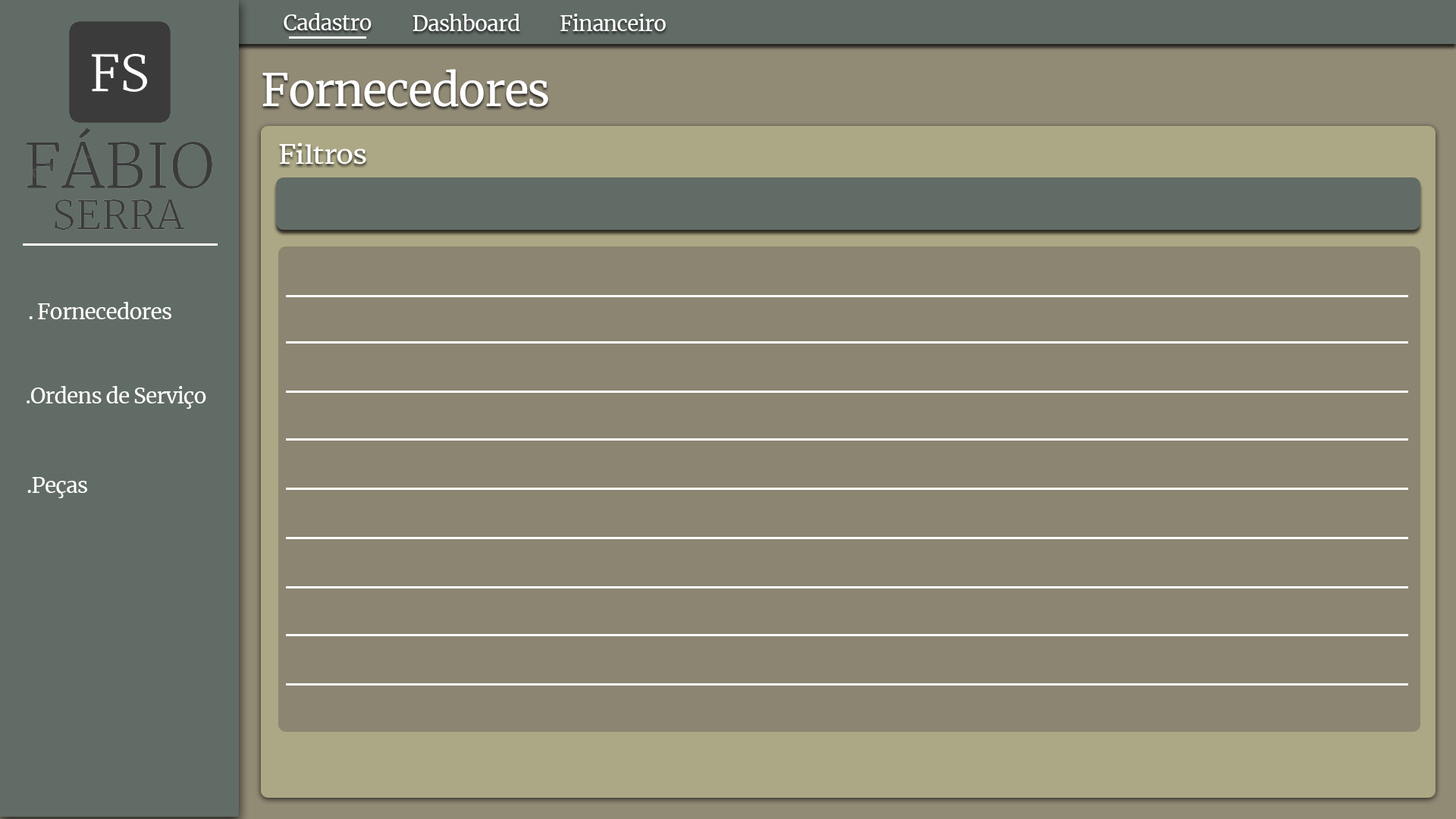
<style>
.page{position:relative;width:1456px;height:819px;background:#8b8571}
.page>*{position:absolute;margin:0}
.t1{font:21.2px "Merriweather-Regular";letter-spacing:-0.03em;color:#ffffff}
.t2{font:45.5px "Merriweather-Regular";letter-spacing:-0.03em;color:#ffffff}
.t3{font:25.9px "Merriweather-Regular";letter-spacing:-0.03em;color:#ffffff;scale:1.11 1}
</style>
<div class="page">
<p class="t1" style="left:284px;top:13px;width:88px;height:17px">Cadastro</p>
<p class="t1" style="left:413px;top:14px;width:107px;height:17px">Dashboard</p>
<p class="t1" style="left:560px;top:14px;width:106px;height:17px">Financeiro</p>
<p class="t2" style="left:262px;top:69px;width:286px;height:38px">Fornecedores</p>
<p class="t3" style="left:279px;top:143px;width:87px;height:21px">Filtros</p>
<p class="t1" style="left:29px;top:302px;width:142px;height:17px">. Fornecedores</p>
<p class="t1" style="left:27px;top:386px;width:179px;height:23px">.Ordens de Serviço</p>
<p class="t1" style="left:27px;top:477px;width:60px;height:21px">.Peças</p>
</div>
